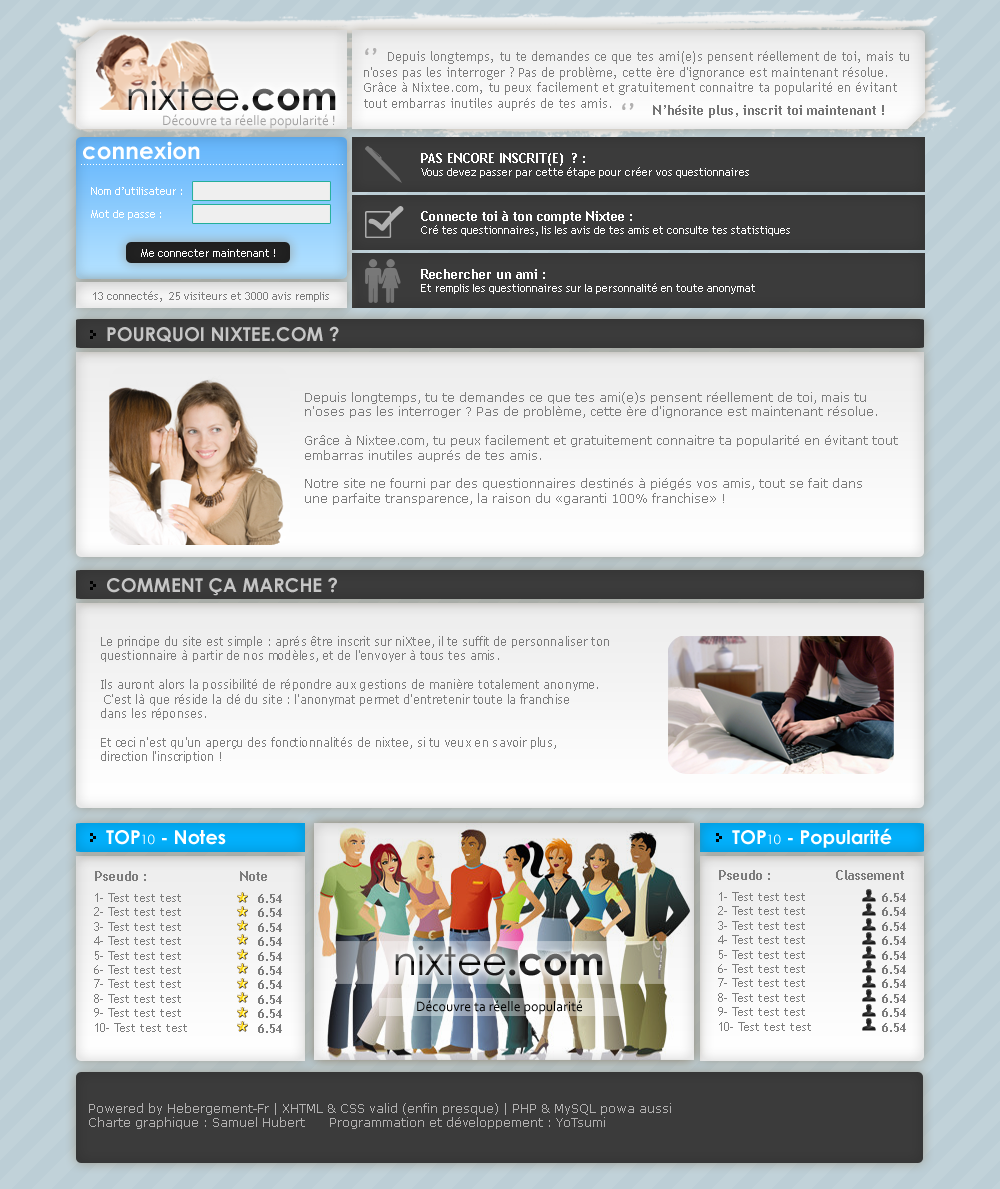
<style>
.page{position:relative;width:1000px;height:1189px}
.page>*{position:absolute;margin:0}
.t1{font:13px "TrebuchetMS";color:#7c7c7c}
.t2{font:21px "TrebuchetMS-Bold";color:#7c7c7c}
.t3{font:21px "TrebuchetMS-Bold";color:#b1b0b0}
.t4{font:39px "CenturyGothic"}
.t5{font:39px "CenturyGothic-Bold"}
.t6{font:13px "TrebuchetMS-Bold";color:#757575}
.t7{font:14px "Corbel";color:#a1a0a0}
.t8{font:23px "CenturyGothic-Bold";color:#ffffff}
.t9{font:11px "TrebuchetMS";color:#ffffff}
.t10{font:13px "TrebuchetMS-Bold";color:#ffffff}
.t11{font:7px "TrebuchetMS";color:#ffffff}
.t12{font:11px "TrebuchetMS";color:#7c7c7c}
.t13{font:19px "CenturyGothic-Bold";color:#c6c6c6}
.t14{font:12px "Verdana";color:#7c7c7c}
.t15{font:12px "Verdana";color:#7c7c7c;scale:0.89 1}
.t16{font:19px "CenturyGothic-Bold";color:#ffffff}
.t17{font:13px "CenturyGothic";color:#ffffff}
.t18{font:13px "TrebuchetMS-Bold";color:#7c7c7c}
.t19{font:12px "TrebuchetMS";color:#7c7c7c}
.t20{font:12px "TrebuchetMS-Bold";color:#7c7c7c}
.t21{font:14px "Corbel";color:#000000}
.t22{font:12px "Verdana";color:#b1b0b0}
</style>
<div class="page">
<p class="t1" style="left:364px;top:51px;width:545px;height:60px"><span class="t2">    </span>Depuis longtemps, tu te demandes ce que tes ami(e)s pensent réellement de toi, mais tu <br>n'oses pas les interroger ? Pas de problème, cette ère d'ignorance est maintenant résolue. <br>Grâce à Nixtee.com, tu peux facilement et gratuitement connaitre ta popularité en évitant <br>tout embarras inutiles auprés de tes amis.</p>
<p class="t3" style="left:365px;top:48px;width:12px;height:7px">‘’</p>
<p class="t4" style="left:128px;top:80px;width:208px;height:31px">nixtee<span class="t5">.com</span></p>
<p class="t3" style="left:622px;top:103px;width:12px;height:7px">‘’</p>
<p class="t6" style="left:653px;top:105px;width:231px;height:13px">N’hésite plus, inscrit toi maintenant !</p>
<p class="t7" style="left:163px;top:114px;width:172px;height:15px">Découvre ta réelle popularité !</p>
<p class="t8" style="left:83px;top:141px;width:117px;height:19px">connexion</p>
<p class="t9" style="left:421px;top:153px;width:328px;height:25px"><span class="t10">PAS ENCORE INSCRIT(E)  ? :<br></span>Vous devez passer par cette étape pour créer vos questionnaires</p>
<p class="t11" style="left:81px;top:164px;width:262px;height:1px">........................................................................................</p>
<p class="t9" style="left:91px;top:187px;width:91px;height:8px">Nom d’utilisateur :</p>
<p class="t9" style="left:91px;top:210px;width:70px;height:10px">Mot de passe :</p>
<p class="t9" style="left:421px;top:211px;width:369px;height:25px"><span class="t10">Connecte toi à ton compte Nixtee :<br></span>Cré tes questionnaires, lis les avis de tes amis et consulte tes statistiques</p>
<p class="t9" style="left:141px;top:249px;width:134px;height:8px">Me connecter maintenant !</p>
<p class="t9" style="left:421px;top:269px;width:334px;height:25px"><span class="t10">Rechercher un ami :<br></span>Et remplis les questionnaires sur la personnalité en toute anonymat</p>
<p class="t12" style="left:93px;top:291px;width:236px;height:11px">13 connectés,  25 visiteurs et 3000 avis remplis</p>
<p class="t13" style="left:107px;top:326px;width:232px;height:16px">POURQUOI NIXTEE.COM ?</p>
<p class="t14" style="left:305px;top:392px;width:593px;height:113px">Depuis longtemps, tu te demandes ce que tes ami(e)s pensent réellement de toi, mais tu <br>n'oses pas les interroger ? Pas de problème, cette ère d'ignorance est maintenant résolue.<br><br>Grâce à Nixtee.com, tu peux facilement et gratuitement connaitre ta popularité en évitant tout <br>embarras inutiles auprés de tes amis. <br><br>Notre site ne fourni par des questionnaires destinés à piégés vos amis, tout se fait dans <br>une parfaite transparence, la raison du «garanti 100% franchise» !</p>
<p class="t13" style="left:107px;top:577px;width:230px;height:19px">COMMENT ÇA MARCHE ?</p>
<p class="t15" style="left:101px;top:636px;width:508px;height:127px">Le principe du site est simple : aprés être inscrit sur niXtee, il te suffit de personnaliser ton <br>questionnaire à partir de nos modèles, et de l'envoyer à tous tes amis. <br><br>Ils auront alors la possibilité de répondre aux gestions de manière totalement anonyme.<br> C'est là que réside la clé du site : l'anonymat permet d'entretenir toute la franchise <br>dans les réponses. <br><br>Et ceci n'est qu'un aperçu des fonctionnalités de nixtee, si tu veux en savoir plus, <br>direction l'inscription !</p>
<p class="t16" style="left:106px;top:830px;width:120px;height:15px">TOP<span class="t17">10</span> - Notes</p>
<p class="t16" style="left:732px;top:828px;width:160px;height:20px">TOP<span class="t17">10</span> - Popularité</p>
<p class="t18" style="left:719px;top:870px;width:185px;height:10px">Pseudo :                Classement</p>
<p class="t18" style="left:95px;top:871px;width:172px;height:10px">Pseudo :                       Note</p>
<p class="t19" style="left:94px;top:893px;width:93px;height:139px">1- Test test test<br>2- Test test test<br>3- Test test test<br>4- Test test test<br>5- Test test test<br>6- Test test test<br>7- Test test test<br>8- Test test test<br>9- Test test test<br>10- Test test test</p>
<p class="t20" style="left:258px;top:894px;width:24px;height:139px">6.54<br>6.54<br>6.54<br>6.54<br>6.54<br>6.54<br>6.54<br>6.54<br>6.54<br>6.54</p>
<p class="t19" style="left:718px;top:892px;width:93px;height:139px">1- Test test test<br>2- Test test test<br>3- Test test test<br>4- Test test test<br>5- Test test test<br>6- Test test test<br>7- Test test test<br>8- Test test test<br>9- Test test test<br>10- Test test test</p>
<p class="t20" style="left:882px;top:893px;width:24px;height:139px">6.54<br>6.54<br>6.54<br>6.54<br>6.54<br>6.54<br>6.54<br>6.54<br>6.54<br>6.54</p>
<p class="t4" style="left:395px;top:945px;width:208px;height:31px">nixtee<span class="t5">.com</span></p>
<p class="t21" style="left:417px;top:1000px;width:165px;height:15px">Découvre ta réelle popularité</p>
<p class="t22" style="left:89px;top:1103px;width:582px;height:26px">Powered by Hebergement-Fr | XHTML &amp; CSS valid (enfin presque) | PHP &amp; MySQL powa aussi<br>Charte graphique : Samuel Hubert      Programmation et développement : YoTsumi</p>
</div>
